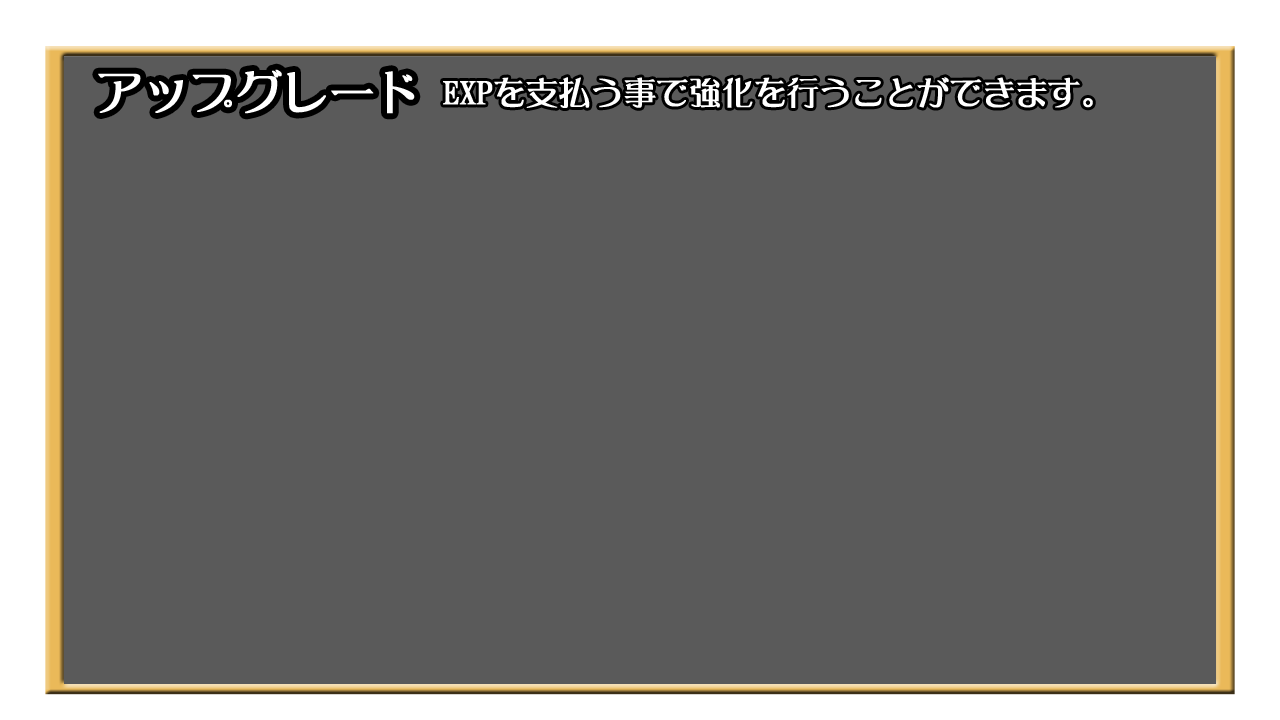
<style>
.page{position:relative;width:1280px;height:720px;background:#5a5a5a}
.page>*{position:absolute;margin:0}
.t1{font:45.3px "DFLeiGaSo-W5-WIN-RKSJ-H";color:#ffffff;font-weight:bold}
.t2{font:31.8px "DFLeiGaSo-W5-WIN-RKSJ-H";color:#ffffff;font-weight:bold}
</style>
<div class="page">
<p class="t1" style="left:98px;top:69px;width:317px;height:45px">アップグレード</p>
<p class="t2" style="left:443px;top:77px;width:650px;height:31px">EXPを支払う事で強化を行うことができます。</p>
</div>
